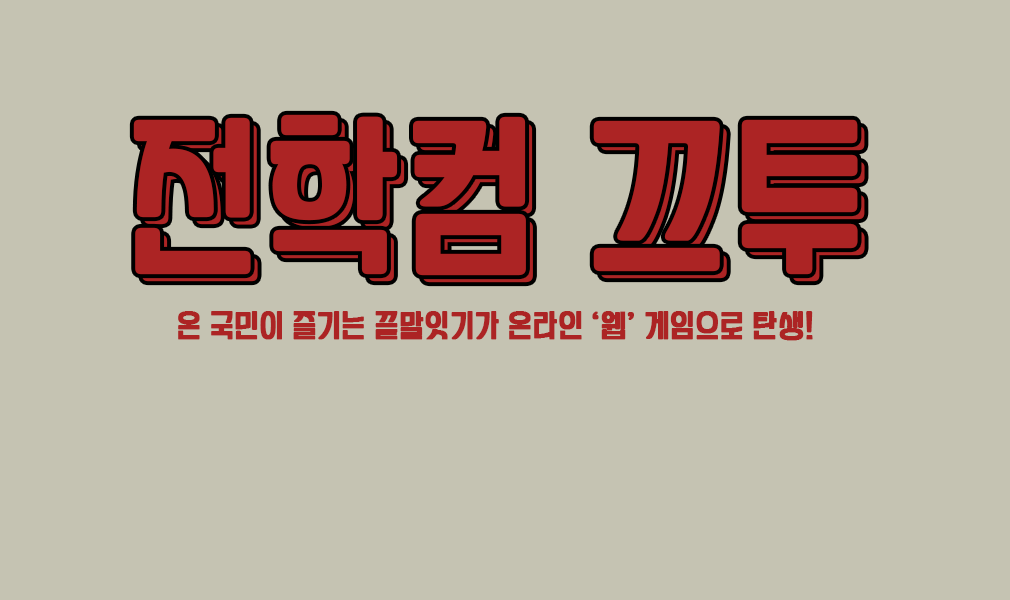
<style>
.page{position:relative;width:1010px;height:600px;background:#c5c3b2}
.page>*{position:absolute;margin:0}
.t1{font:156.8px "YANGJIN";color:#ac2424;font-weight:bold}
.t2{font:27.9px "YANGJIN";color:#ac2424;font-weight:bold}
</style>
<div class="page">
<p class="t1" style="left:133px;top:114px;width:725px;height:162px">전학컴 끄투</p>
<p class="t1" style="left:140px;top:121px;width:725px;height:162px">전학컴 끄투</p>
<p class="t2" style="left:178px;top:311px;width:635px;height:30px">온 국민이 즐기는 끝말잇기가 온라인 ‘웹’ 게임으로 탄생!</p>
</div>
